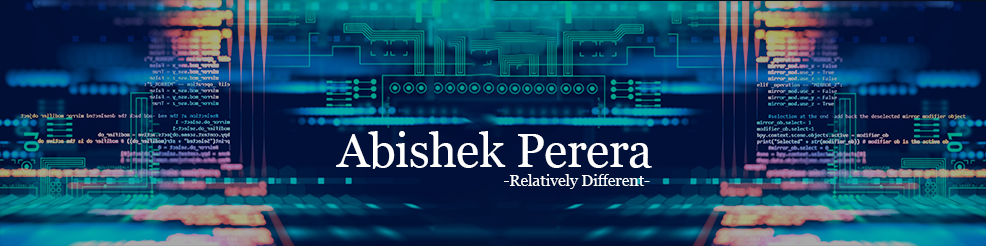
<style>
.page{position:relative;width:986px;height:246px}
.page>*{position:absolute;margin:0}
.t1{font:48px "Georgia";letter-spacing:-0.01em;color:#fefefe}
.t2{font:16px "Georgia";letter-spacing:-0.01em;color:#fefefe}
</style>
<div class="page">
<p class="t1" style="left:336px;top:131px;width:316px;height:38px">Abishek Perera</p>
<p class="t2" style="left:504px;top:174px;width:146px;height:15px">-Relatively Different-</p>
</div>
